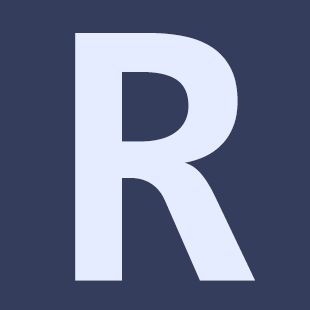
<style>
.page{position:relative;width:310px;height:310px;background:#343d5b}
.page>*{position:absolute;margin:0}
.t1{font:387.5px "Consolas-Bold";color:#e5ecff}
</style>
<div class="page">
<p class="t1" style="left:75px;top:33px;width:180px;height:248px">R</p>
</div>
